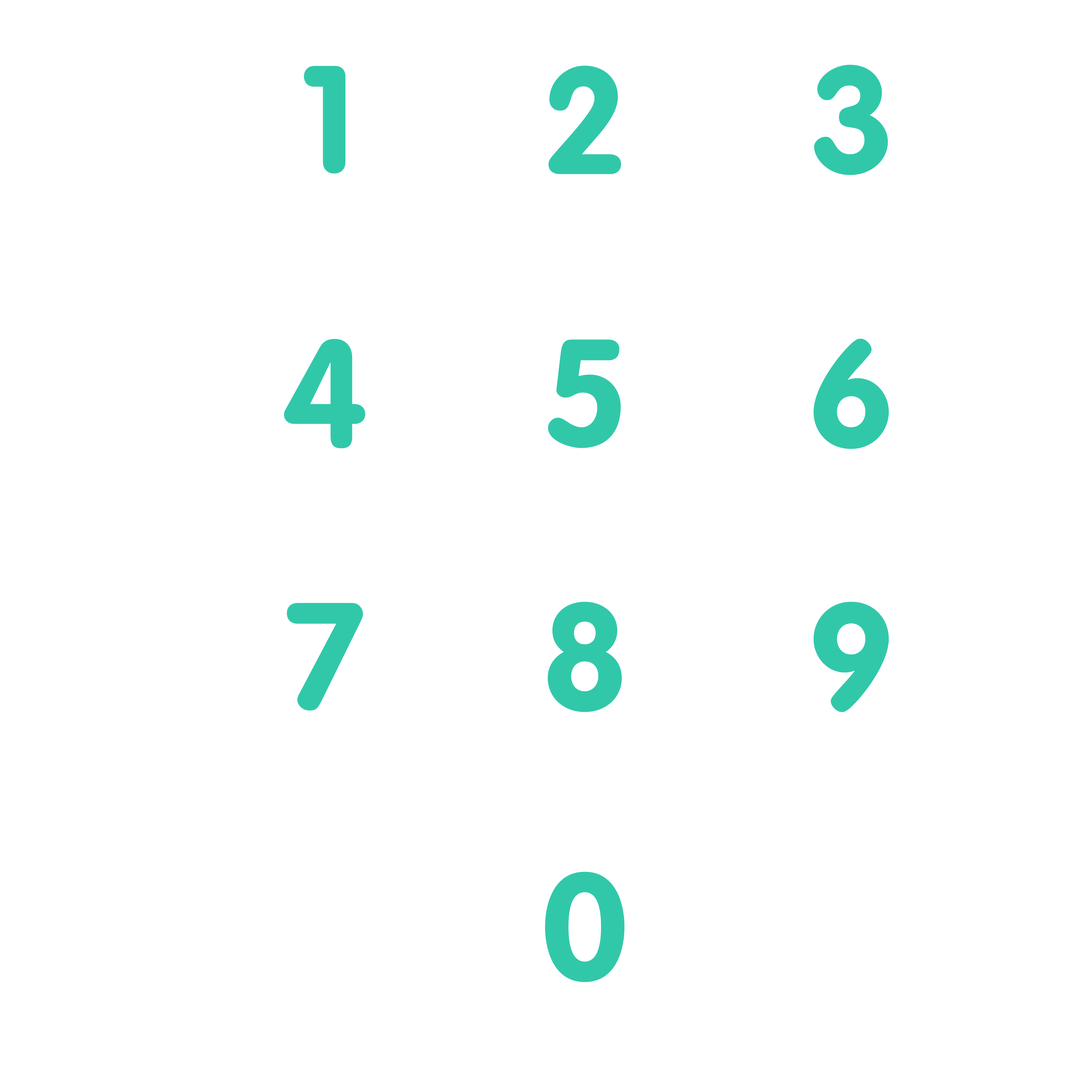
<style>
.page{position:relative;width:1092px;height:1092px;background:#ffffff}
.page>*{position:absolute;margin:0}
.t1{font:149.7px "RotondaC-Bold";color:#31c8aa}
</style>
<div class="page">
<p class="t1" style="left:304px;top:66px;width:41px;height:108px">1</p>
<p class="t1" style="left:548px;top:66px;width:73px;height:108px">2</p>
<p class="t1" style="left:814px;top:65px;width:74px;height:110px">3</p>
<p class="t1" style="left:284px;top:339px;width:81px;height:109px">4</p>
<p class="t1" style="left:548px;top:339px;width:73px;height:109px">5</p>
<p class="t1" style="left:813px;top:339px;width:76px;height:110px">6</p>
<p class="t1" style="left:287px;top:603px;width:76px;height:108px">7</p>
<p class="t1" style="left:547px;top:602px;width:75px;height:110px">8</p>
<p class="t1" style="left:813px;top:602px;width:76px;height:110px">9</p>
<p class="t1" style="left:545px;top:872px;width:79px;height:110px">0</p>
</div>
